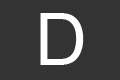
<style>
.page{position:relative;width:120px;height:80px;background:#333333}
.page>*{position:absolute;margin:0}
.t1{font:72px "ArialMT";color:#ffffff}
</style>
<div class="page">
<p class="t1" style="left:40px;top:13px;width:44px;height:52px">D</p>
</div>
